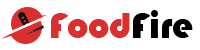
<style>
.page{position:relative;width:200px;height:50px;background:#ffffff}
.page>*{position:absolute;margin:0}
.t1{font:37.5px "Bauhaus93";color:#db2e2e}
.t2{font:37.5px "Bauhaus93";color:#000000}
</style>
<div class="page">
<p class="t1" style="left:51px;top:10px;width:142px;height:28px">Food<span class="t2">Fire</span></p>
</div>
